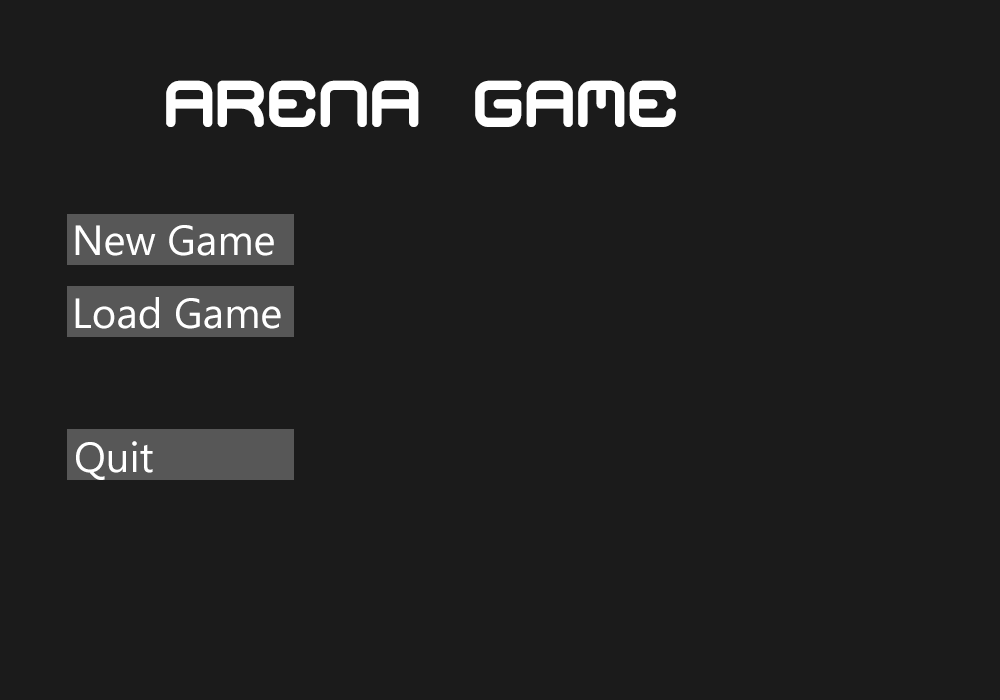
<style>
.page{position:relative;width:1000px;height:700px;background:#1b1b1b}
.page>*{position:absolute;margin:0}
.t1{font:66px "MishmashBRK";color:#ffffff}
.t2{font:42px "MicrosoftTaiLe";color:#ffffff}
</style>
<div class="page">
<p class="t1" style="left:166px;top:80px;width:510px;height:47px">Arena Game</p>
<p class="t2" style="left:75px;top:225px;width:199px;height:31px">New Game</p>
<p class="t2" style="left:75px;top:297px;width:206px;height:32px">Load Game</p>
<p class="t2" style="left:76px;top:441px;width:77px;height:39px">Quit</p>
</div>
